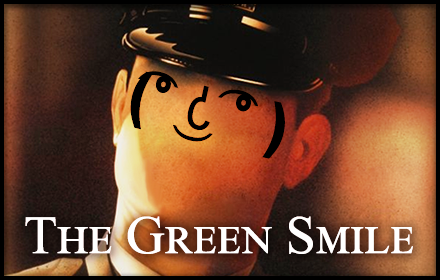
<style>
.page{position:relative;width:440px;height:280px}
.page>*{position:absolute;margin:0}
.t1{font:60.8px "ArialMT";color:#000000;font-variant:small-caps;scale:0.86 1}
.t2{font:60.8px "Arial-Black";color:#000000;font-variant:small-caps;scale:0.86 1}
.t3{font:54px "TimesNewRomanPSMT";color:#ffffff;font-variant:small-caps}
</style>
<div class="page">
<p class="t1" style="left:130px;top:71px;width:155px;height:88px;rotate:-167deg"><span class="t2">( </span>͡<span class="t2">° </span>͜ʖ ͡<span class="t2">°)</span></p>
<p class="t3" style="left:25px;top:216px;width:388px;height:38px">The Green Smile</p>
</div>
